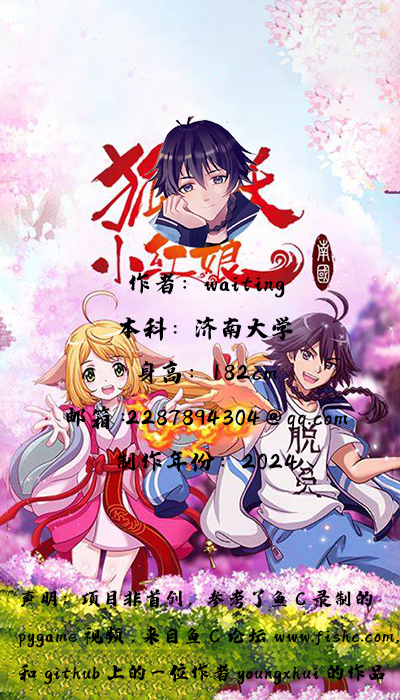
<style>
.page{position:relative;width:400px;height:700px}
.page>*{position:absolute;margin:0}
.t1{font:25.5px "zihun50hao-baigetianxingti";color:#000000}
.t2{font:20.9px "zihun50hao-baigetianxingti";color:#000000}
</style>
<div class="page">
<p class="t1" style="left:66px;top:272px;width:282px;height:200px;text-align:center">作者：waiting<br>本科：济南大学<br>身高：182cm<br>邮箱:2287894304@qq.com<br>制作年份：2024</p>
<p class="t2" style="left:18px;top:589px;width:382px;height:96px">声明：项目非首创，参考了鱼C录制的<br>pygame视频,来自鱼C论坛www.fishc.com,<br>和github上的一位作者youngxhui的作品</p>
</div>
